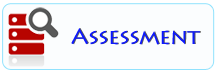
<style>
.page{position:relative;width:216px;height:73px;background:#fbfdfe}
.page>*{position:absolute;margin:0}
.t1{font:22px "LithosPro-Regular";letter-spacing:-0.025em;color:#0d18ff}
</style>
<div class="page">
<p class="t1" style="left:71px;top:28px;width:129px;height:17px">Assessment</p>
</div>
